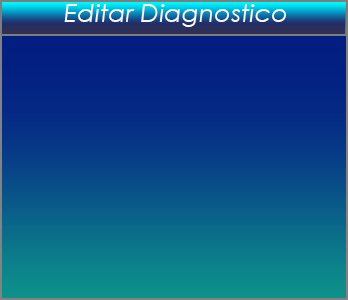
<style>
.page{position:relative;width:348px;height:300px}
.page>*{position:absolute;margin:0}
.t1{font:25.4px "CenturyGothic-Italic";color:#f9f9fa}
</style>
<div class="page">
<p class="t1" style="left:64px;top:4px;width:222px;height:23px">Editar Diagnostico</p>
</div>
